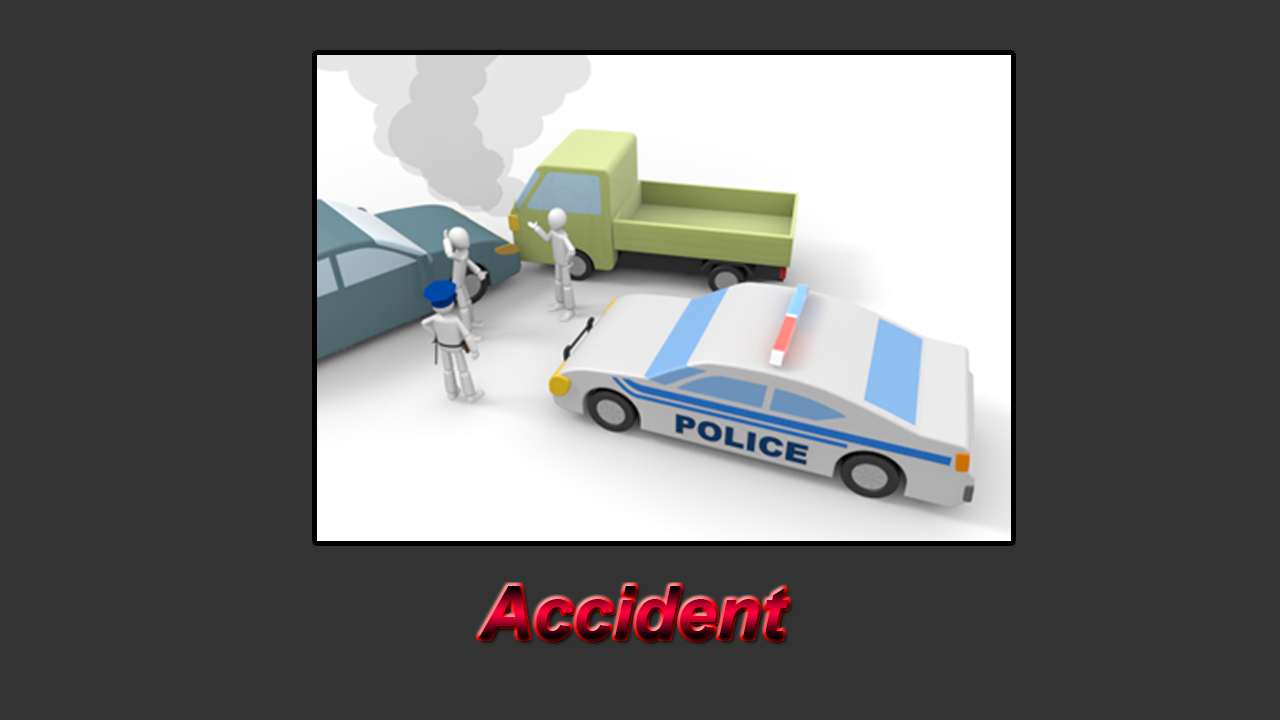
<style>
.page{position:relative;width:1280px;height:720px;background:#333333}
.page>*{position:absolute;margin:0}
.t1{font:72px "Arial-BoldItalicMT"}
</style>
<div class="page">
<p class="t1" style="left:479px;top:586px;width:310px;height:53px">Accident</p>
</div>
